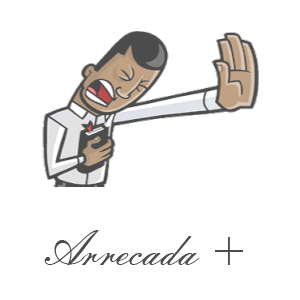
<style>
.page{position:relative;width:300px;height:300px;background:#ffffff}
.page>*{position:absolute;margin:0}
.t1{font:48px "EmbassyBT-Regular";color:#4c4c4c}
</style>
<div class="page">
<p class="t1" style="left:44px;top:230px;width:199px;height:35px">Arrecada +</p>
</div>
